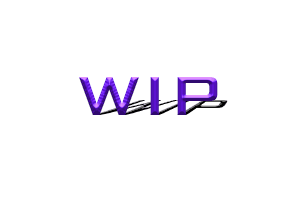
<style>
.page{position:relative;width:300px;height:200px;background:#ffffff}
.page>*{position:absolute;margin:0}
.t1{font:72px "BankGothicBT-Light";font-weight:bold}
</style>
<div class="page">
<p class="t1" style="left:79px;top:77px;width:139px;height:38px">WIP</p>
</div>
